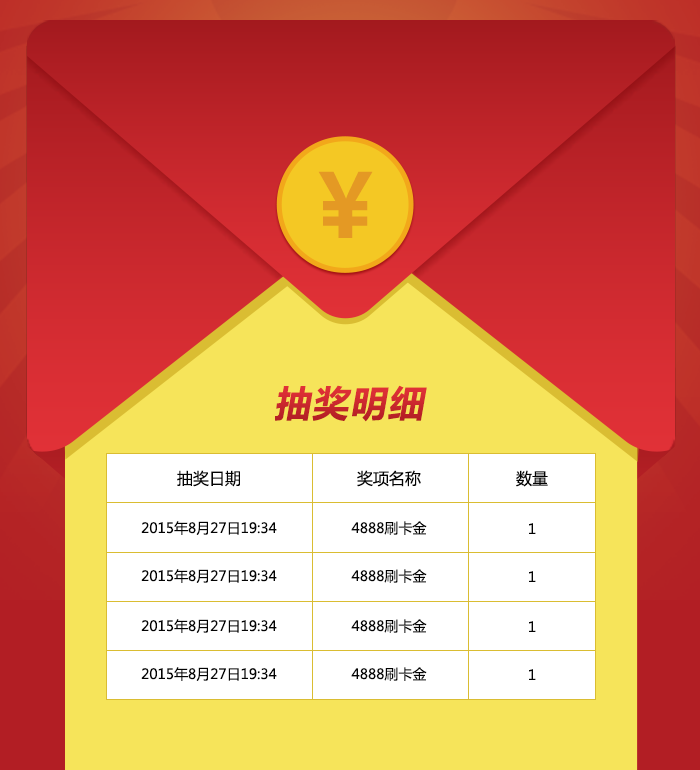
<style>
.page{position:relative;width:700px;height:770px;background:#f6e45a}
.page>*{position:absolute;margin:0}
.t1{font:36px "MicrosoftYaHei-Bold";letter-spacing:0.05em;color:#ca282e;font-style:italic}
.t2{font:16px "MicrosoftYaHei";color:#030303}
.t3{font:14px "MicrosoftYaHei";color:#030303}
</style>
<div class="page">
<p class="t1" style="left:275px;top:385px;width:152px;height:37px">抽奖明细</p>
<p class="t2" style="left:177px;top:470px;width:63px;height:17px">抽奖日期</p>
<p class="t2" style="left:357px;top:470px;width:64px;height:17px">奖项名称</p>
<p class="t2" style="left:516px;top:470px;width:32px;height:17px">数量</p>
<p class="t3" style="left:141px;top:521px;width:136px;height:14px">2015年8月27日19:34</p>
<p class="t3" style="left:351px;top:521px;width:76px;height:14px">4888刷卡金</p>
<p class="t3" style="left:529px;top:523px;width:7px;height:11px">1</p>
<p class="t3" style="left:141px;top:569px;width:136px;height:14px">2015年8月27日19:34</p>
<p class="t3" style="left:351px;top:569px;width:76px;height:14px">4888刷卡金</p>
<p class="t3" style="left:529px;top:571px;width:7px;height:11px">1</p>
<p class="t3" style="left:141px;top:619px;width:136px;height:14px">2015年8月27日19:34</p>
<p class="t3" style="left:351px;top:619px;width:76px;height:14px">4888刷卡金</p>
<p class="t3" style="left:529px;top:621px;width:7px;height:11px">1</p>
<p class="t3" style="left:141px;top:667px;width:136px;height:14px">2015年8月27日19:34</p>
<p class="t3" style="left:351px;top:667px;width:76px;height:14px">4888刷卡金</p>
<p class="t3" style="left:529px;top:669px;width:7px;height:11px">1</p>
</div>
